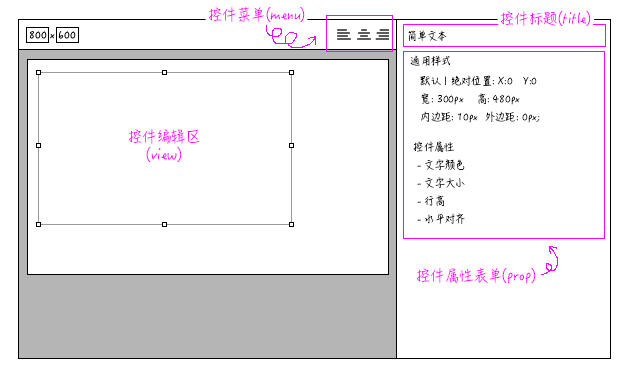
<style>
.page{position:relative;width:631px;height:380px;background:#ffffff}
.page>*{position:absolute;margin:0}
.t1{font:14px "HanziPenSC-W3";color:#ff00ff}
.t2{font:10px "HanziPenSC-W3";color:#000000}
.t3{font:10px/18px "HanziPenSC-W3";color:#000000}
.t4{font:10px/14px "HanziPenSC-W3";color:#000000}
.t5{font:14px/18px "HanziPenSC-W3";color:#ff00ff}
</style>
<div class="page">
<p class="t1" style="left:208px;top:6px;width:97px;height:17px">控件菜单(menu)</p>
<p class="t1" style="left:500px;top:10px;width:91px;height:17px">控件标题(title)</p>
<p class="t2" style="left:408px;top:30px;width:39px;height:11px">简单文本</p>
<p class="t2" style="left:410px;top:55px;width:41px;height:11px">通用样式</p>
<p class="t3" style="left:420px;top:75px;width:120px;height:48px"><span class="t4">默认 | 绝对位置: X:0   Y:0<br></span>宽: 300px    高: 480px<br>内边距: 10px  外边距: 0px;</p>
<p class="t5" style="left:128px;top:129px;width:72px;height:34px;text-align:center">控件编辑区<br>(view)</p>
<p class="t3" style="left:413px;top:141px;width:52px;height:83px">控件属性<br> - 文字颜色<br> - 文字大小<br> - 行高<br> - 水平对齐</p>
<p class="t1" style="left:416px;top:267px;width:120px;height:17px">控件属性表单(prop)</p>
</div>
